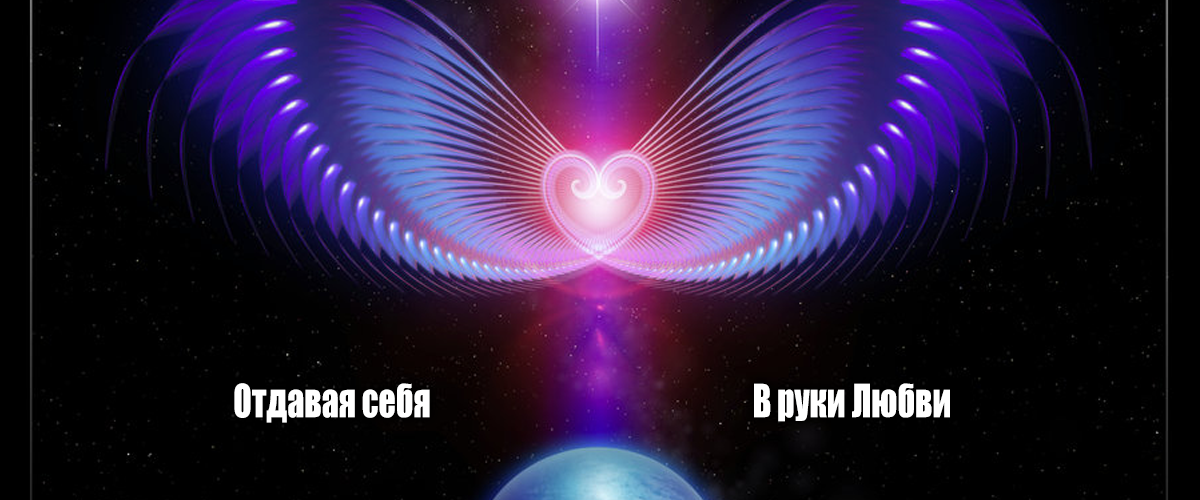
<style>
.page{position:relative;width:1200px;height:500px;background:#000000}
.page>*{position:absolute;margin:0}
.t1{font:42.2px "Impact";color:#ffffff;scale:0.8 1}
</style>
<div class="page">
<p class="t1" style="left:234px;top:383px;width:196px;height:40px">Отдавая себя</p>
<p class="t1" style="left:754px;top:383px;width:196px;height:39px">В руки Любви</p>
</div>
